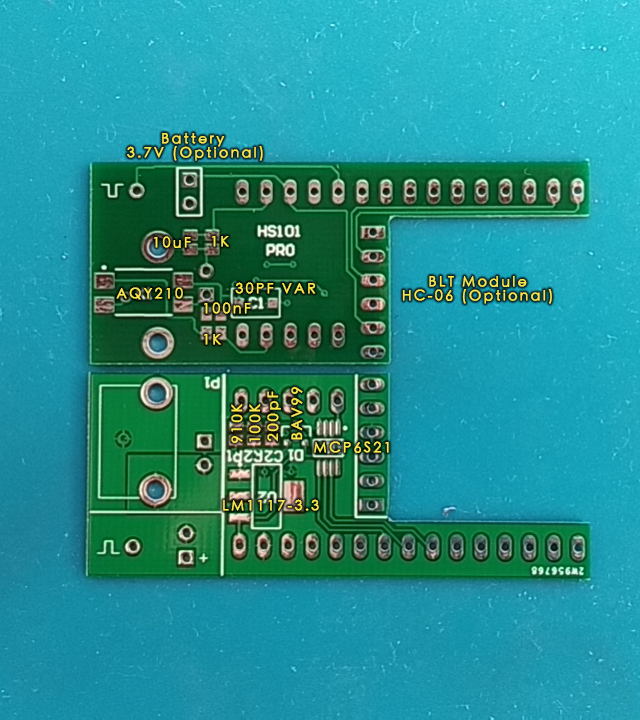
<style>
.page{position:relative;width:640px;height:720px}
.page>*{position:absolute;margin:0}
.t1{font:14px/14px "STHeitiTC-Light";letter-spacing:0.15em;color:#fae74b;font-weight:bold}
.t2{font:14px "STHeitiTC-Light";letter-spacing:0.15em;color:#fae74b;font-weight:bold}
.t3{font:14px "STHeitiTC-Light";letter-spacing:0.15em;color:#fae74b;text-transform:uppercase;font-weight:bold}
</style>
<div class="page">
<p class="t1" style="left:127px;top:133px;width:136px;height:28px;text-align:center">Battery <br>3.7V (Optional)</p>
<p class="t2" style="left:154px;top:236px;width:37px;height:12px">10uF</p>
<p class="t3" style="left:212px;top:236px;width:17px;height:11px">1K</p>
<p class="t1" style="left:402px;top:276px;width:150px;height:28px;text-align:center">BLT Module<br>HC-06 (Optional)</p>
<p class="t3" style="left:116px;top:287px;width:67px;height:13px">AQY210</p>
<p class="t3" style="left:235px;top:282px;width:81px;height:12px">30pF VAR</p>
<p class="t2" style="left:204px;top:302px;width:47px;height:12px">100nF</p>
<p class="t3" style="left:204px;top:334px;width:17px;height:11px">1K</p>
<p class="t2" style="left:291px;top:386px;width:12px;height:54px;rotate:-90deg">BAV99</p>
<p class="t2" style="left:267px;top:391px;width:14px;height:51px;rotate:-90deg">200pF</p>
<p class="t2" style="left:231px;top:403px;width:12px;height:40px;rotate:-90deg">910K</p>
<p class="t2" style="left:249px;top:403px;width:12px;height:39px;rotate:-90deg">100K</p>
<p class="t2" style="left:314px;top:441px;width:75px;height:12px">MCP6S21</p>
<p class="t2" style="left:223px;top:499px;width:96px;height:12px">LM1117-3.3</p>
</div>
